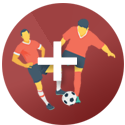
<style>
.page{position:relative;width:125px;height:125px;background:#ffffff}
.page>*{position:absolute;margin:0}
.t1{font:75px "Poppins-Regular";color:#ffffff;font-weight:bold}
</style>
<div class="page">
<p class="t1" style="left:37px;top:41px;width:40px;height:40px">+</p>
</div>
